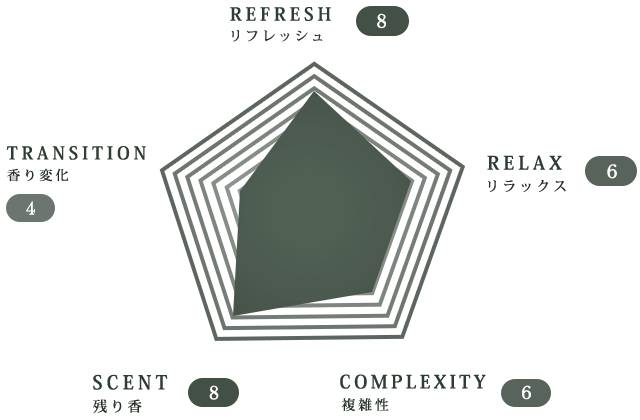
<style>
.page{position:relative;width:640px;height:420px;background:#ffffff}
.page>*{position:absolute;margin:0}
.t1{font:17.9px "KozMinPr6N-Bold";letter-spacing:0.22em;color:#27452e}
.t2{font:17.9px "LibreBaskerville-Regular";letter-spacing:0.06em;color:#ffffff}
.t3{font:13.4px "KozMinPr6N-Medium";letter-spacing:0.22em;color:#20381f}
.t4{font:17.5px "KozMinPr6N-Bold";letter-spacing:0.22em;color:#27452e}
.t5{font:18.4px "KozMinPr6N-Bold";letter-spacing:0.22em;color:#27452e}
.t6{font:13.1px "KozMinPr6N-Medium";letter-spacing:0.22em;color:#20381f}
.t7{font:17.7px "LibreBaskerville-Regular";letter-spacing:0.06em;color:#ffffff}
.t8{font:13.8px "KozMinPr6N-Medium";letter-spacing:0.22em;color:#20381f}
.t9{font:16.8px "LibreBaskerville-Regular";letter-spacing:0.06em;color:#ffffff}
.t10{font:18.9px "KozMinPr6N-Bold";letter-spacing:0.22em;color:#27452e}
.t11{font:18.2px "KozMinPr6N-Bold";letter-spacing:0.18em;color:#27452e}
.t12{font:17.4px "LibreBaskerville-Regular";letter-spacing:0.06em;color:#ffffff}
.t13{font:17.1px "LibreBaskerville-Regular";letter-spacing:0.06em;color:#ffffff}
.t14{font:14.2px "KozMinPr6N-Medium";letter-spacing:0.22em;color:#20381f}
.t15{font:13.7px "KozMinPr6N-Medium";letter-spacing:0.22em;color:#20381f}
</style>
<div class="page">
<p class="t1" style="left:230px;top:7px;width:101px;height:14px">REFRESH</p>
<p class="t2" style="left:377px;top:13px;width:9px;height:16px">8</p>
<p class="t3" style="left:231px;top:30px;width:92px;height:12px">リフレッシュ</p>
<p class="t4" style="left:6px;top:146px;width:140px;height:14px">TRANSITION</p>
<p class="t5" style="left:487px;top:155px;width:75px;height:15px">RELAX</p>
<p class="t6" style="left:7px;top:168px;width:62px;height:14px">香り変化</p>
<p class="t7" style="left:607px;top:164px;width:10px;height:15px">6</p>
<p class="t8" style="left:488px;top:179px;width:78px;height:13px">リラックス</p>
<p class="t9" style="left:26px;top:201px;width:9px;height:14px">4</p>
<p class="t10" style="left:93px;top:374px;width:75px;height:16px">SCENT</p>
<p class="t11" style="left:340px;top:374px;width:146px;height:15px">COMPLEXITY</p>
<p class="t12" style="left:209px;top:385px;width:10px;height:15px">8</p>
<p class="t13" style="left:522px;top:385px;width:9px;height:15px">6</p>
<p class="t14" style="left:93px;top:399px;width:49px;height:14px">残り香</p>
<p class="t15" style="left:341px;top:398px;width:48px;height:14px">複雑性</p>
</div>
